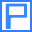
<style>
.page{position:relative;width:32px;height:32px;background:#fdfbfb}
.page>*{position:absolute;margin:0}
.t1{font:36px "bitwise";color:#3489fe}
</style>
<div class="page">
<p class="t1" style="left:5px;top:3px;width:22px;height:26px">P</p>
</div>
